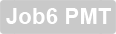
<style>
.page{position:relative;width:116px;height:34px;background:#c9c9c9}
.page>*{position:absolute;margin:0}
.t1{font:22.1px "Arial-BoldMT";color:#ffffff}
</style>
<div class="page">
<p class="t1" style="left:6px;top:8px;width:105px;height:16px">Job6 PMT</p>
</div>
